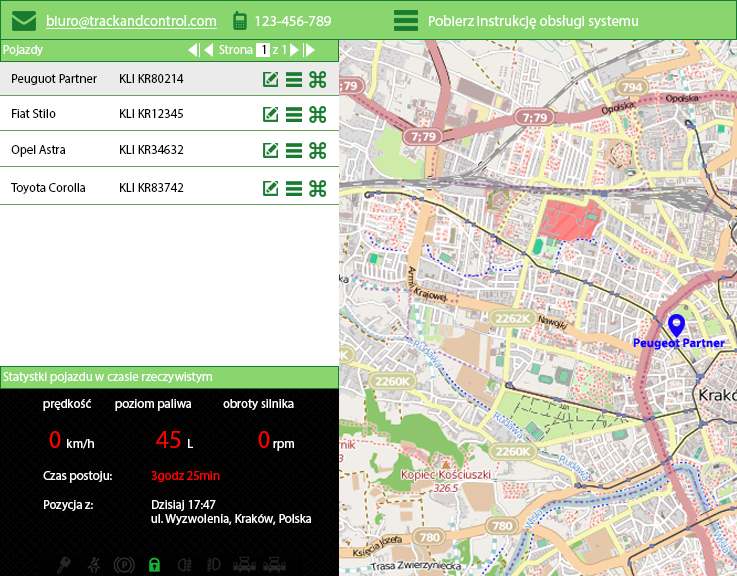
<style>
.page{position:relative;width:737px;height:576px;background:#ffffff}
.page>*{position:absolute;margin:0}
.t1{font:14.7px "MyriadPro-Regular";color:#ffffff}
.t2{font:14.7px "MyriadPro-Regular";color:#ffffff;text-decoration:underline}
.t3{font:12.6px "MyriadPro-Regular";color:#ffffff}
.t4{font:12.6px "MyriadPro-Regular";color:#000000}
.t5{font:12.6px "MyriadPro-Bold";color:#1800ff}
.t6{font:12.6px "MyriadPro-Regular";color:#ff0000}
.t7{font:25.2px "MyriadPro-Regular";color:#ffffff}
.t8{font:25.2px "MyriadPro-Regular";color:#ff0000}
</style>
<div class="page">
<p class="t1" style="left:46px;top:15px;width:592px;height:14px"><span class="t2">biuro@trackandcontrol.com</span>            123-456-789                               Pobierz instrukcję obsługi systemu</p>
<p class="t3" style="left:3px;top:45px;width:283px;height:11px">Pojazdy     Strona <span class="t4">  1 </span> z 1</p>
<p class="t4" style="left:12px;top:74px;width:172px;height:11px">Peuguot Partner KLI KR80214</p>
<p class="t4" style="left:12px;top:109px;width:171px;height:9px">Fiat Stilo            KLI KR12345</p>
<p class="t4" style="left:11px;top:145px;width:173px;height:12px">Opel Astra        KLI KR34632</p>
<p class="t4" style="left:11px;top:183px;width:173px;height:11px">Toyota Corolla KLI KR83742</p>
<p class="t5" style="left:633px;top:338px;width:92px;height:12px">Peugeot Partner</p>
<p class="t3" style="left:3px;top:372px;width:209px;height:12px">Statystki pojazdu w czasie rzeczywistym</p>
<p class="t3" style="left:43px;top:399px;width:268px;height:126px">prędkość poziom paliwa obroty silnika<br><br><br><br><br>Czas postoju:  <span class="t6">3godz 25min<br></span><br>Pozycja z:   Dzisiaj 17:47<br>   ul. Wyzwolenia, Kraków, Polska</p>
<p class="t3" style="left:49px;top:431px;width:245px;height:20px"><span class="t7"> </span><span class="t8">0 </span>km/h                       <span class="t8">45 </span>L                        <span class="t8">0 </span>rpm</p>
</div>
